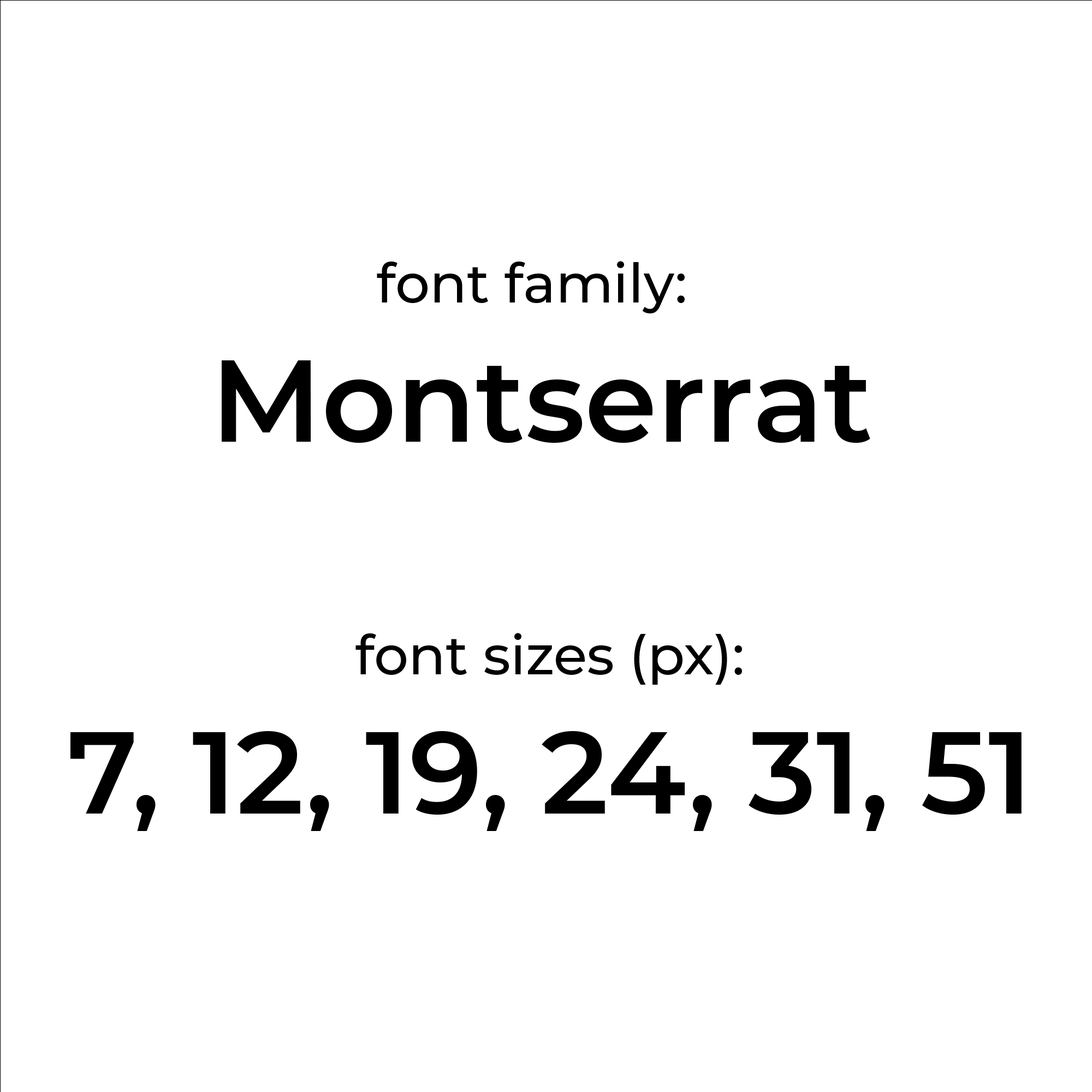
<style>
.page{position:relative;width:1092px;height:1092px;background:#ffffff}
.page>*{position:absolute;margin:0}
.t1{font:54.6px "Montserrat-Medium";color:#000000}
.t2{font:116px "Montserrat-SemiBold";color:#000000}
</style>
<div class="page">
<p class="t1" style="left:222px;top:261px;width:648px;height:182px;text-align:center">font family: <br><span class="t2">Montserrat</span></p>
<p class="t2" style="left:70px;top:633px;width:952px;height:198px;text-align:center"><span class="t1">font sizes (px):<br></span>7, 12, 19, 24, 31, 51</p>
</div>
